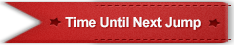
<style>
.page{position:relative;width:234px;height:45px}
.page>*{position:absolute;margin:0}
.t1{font:14px "Arial-BoldMT";letter-spacing:-0.025em;color:#f9fbfc}
</style>
<div class="page">
<p class="t1" style="left:65px;top:17px;width:136px;height:13px">Time Until Next Jump</p>
</div>
